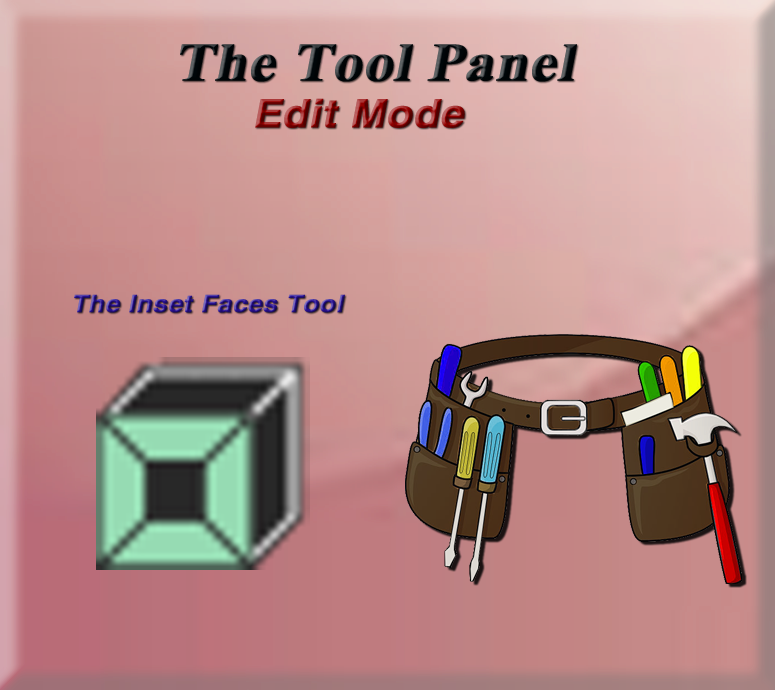
<style>
.page{position:relative;width:775px;height:690px}
.page>*{position:absolute;margin:0}
.t1{font:53.9px "TimesNewRomanPS-BoldMT";color:#000609;font-weight:bold;font-style:italic;scale:1.08 1}
.t2{font:39.1px "HelveticaLTStd-Bold";font-weight:bold;font-style:italic;scale:1.08 1}
.t3{font:53.9px "TimesNewRomanPS-BoldMT";font-weight:bold;font-style:italic;scale:1.08 1}
.t4{font:24.2px "HelveticaLTStd-Bold";font-weight:bold;font-style:italic;scale:1.08 1}
</style>
<div class="page">
<p class="t1" style="left:180px;top:44px;width:397px;height:38px">The Tool Panel</p>
<p class="t2" style="left:255px;top:98px;width:210px;height:30px"><span class="t3"> </span>Edit Mode</p>
<p class="t4" style="left:74px;top:294px;width:271px;height:19px">The Inset Faces Tool</p>
</div>
